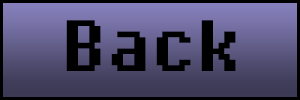
<style>
.page{position:relative;width:300px;height:100px;background:#000000}
.page>*{position:absolute;margin:0}
.t1{font:72px "Fixedsys";color:#000000}
</style>
<div class="page">
<p class="t1" style="left:66px;top:20px;width:170px;height:51px">Back</p>
</div>
